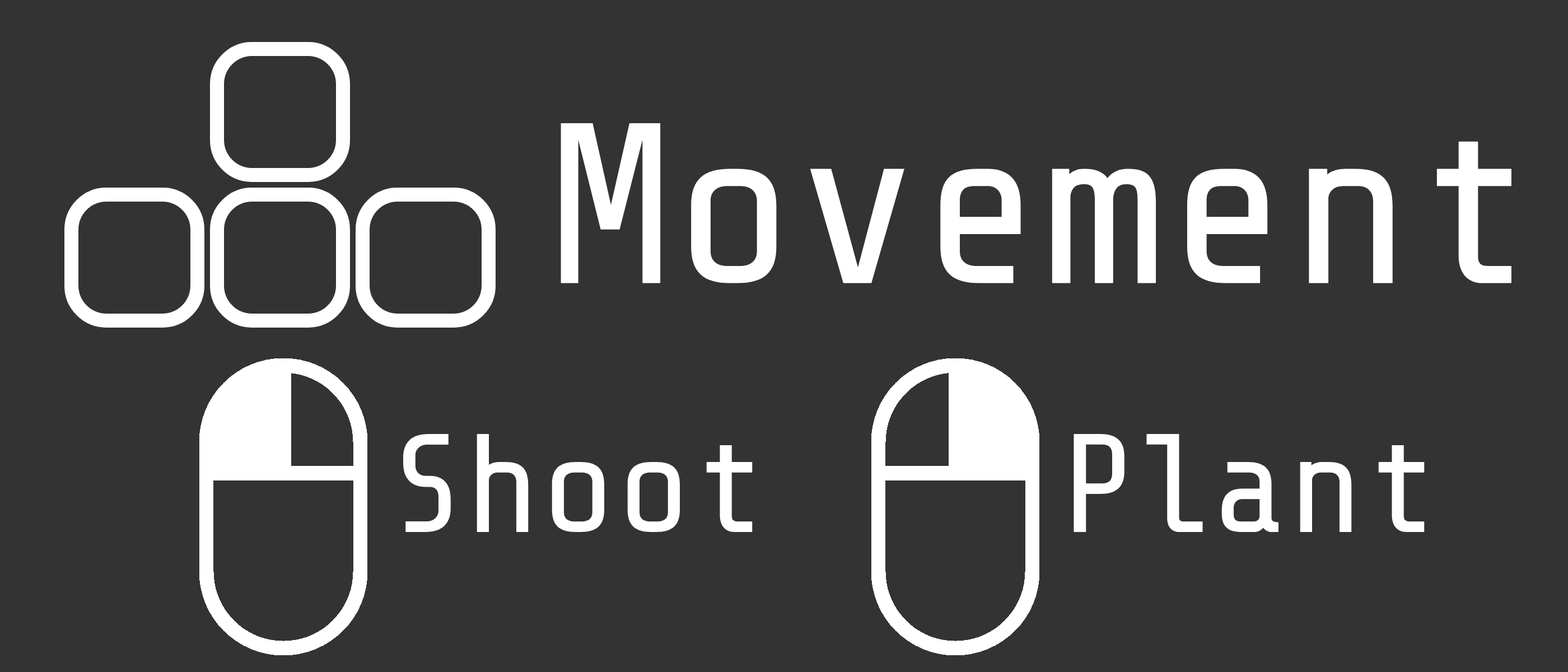
<style>
.page{position:relative;width:1568px;height:672px;background:#333333}
.page>*{position:absolute;margin:0}
.t1{font:228.5px "Share-TechMono";color:#ffffff}
.t2{font:140px "Share-TechMono";color:#ffffff}
</style>
<div class="page">
<p class="t1" style="left:561px;top:123px;width:950px;height:160px">Movement</p>
<p class="t2" style="left:403px;top:434px;width:350px;height:98px">Shoot</p>
<p class="t2" style="left:1074px;top:434px;width:351px;height:98px">Plant</p>
</div>
